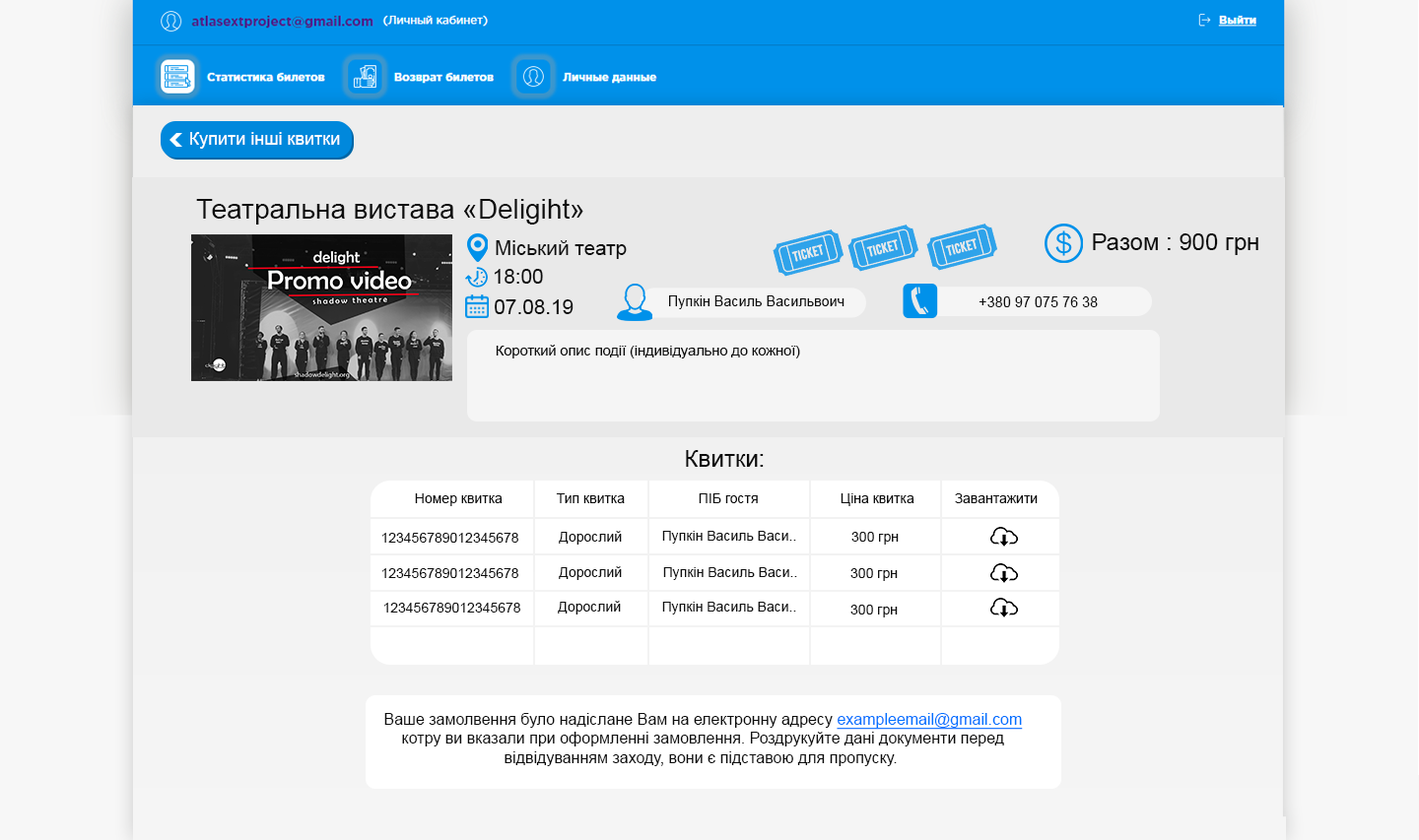
<style>
.page{position:relative;width:1419px;height:840px}
.page>*{position:absolute;margin:0}
.t1{font:17.7px "ArialMT";color:#ffffff}
.t2{font:27.6px "ArialMT";color:#0d0d0d}
.t3{font:23.6px "ArialMT";color:#0c0c0c}
.t4{font:20.3px "ArialMT";color:#0f0f0f}
.t5{font:20.3px "ArialMT";color:#0d0d0d}
.t6{font:14.4px "ArialMT";color:#0d0d0d}
.t7{font:14.2px "ArialMT";color:#0d0d0d}
.t8{font:23.6px "ArialMT";color:#0d0c0c}
.t9{font:13.8px "ArialMT";color:#0d0d0d}
.t10{font:13.8px "ArialMT";color:#111111}
.t11{font:15.8px "ArialMT";color:#0d0d0d}
.t12{font:15.8px "ArialMT";color:#0072ff;text-decoration:underline}
</style>
<div class="page">
<p class="t1" style="left:190px;top:132px;width:150px;height:17px">Купити інші квитки</p>
<p class="t2" style="left:196px;top:199px;width:387px;height:26px">Театральна вистава «Deligiht»</p>
<p class="t3" style="left:1093px;top:234px;width:165px;height:21px">Разом : 900 грн</p>
<p class="t4" style="left:496px;top:240px;width:131px;height:19px">Міський театр</p>
<p class="t5" style="left:494px;top:269px;width:49px;height:15px">18:00</p>
<p class="t5" style="left:495px;top:300px;width:78px;height:14px">07.08.19</p>
<p class="t6" style="left:669px;top:296px;width:175px;height:13px">Пупкін Василь Васильвоич</p>
<p class="t6" style="left:978px;top:297px;width:120px;height:10px">+380 97 075 76 38</p>
<p class="t7" style="left:496px;top:345px;width:304px;height:14px">Короткий опис події (індивідуально до кожної)</p>
<p class="t8" style="left:686px;top:450px;width:78px;height:17px">Квитки:</p>
<p class="t9" style="left:415px;top:494px;width:623px;height:12px">Номер квитка  Тип квитка   ПІБ гостя   Ціна квитка   Завантажити</p>
<p class="t9" style="left:381px;top:533px;width:137px;height:10px">123456789012345678</p>
<p class="t10" style="left:559px;top:531px;width:63px;height:14px">Дорослий</p>
<p class="t10" style="left:662px;top:531px;width:134px;height:13px">Пупкін Василь Васи..</p>
<p class="t10" style="left:851px;top:532px;width:48px;height:13px">300 грн</p>
<p class="t9" style="left:381px;top:569px;width:137px;height:9px">123456789012345678</p>
<p class="t10" style="left:559px;top:567px;width:63px;height:13px">Дорослий</p>
<p class="t10" style="left:663px;top:568px;width:134px;height:12px">Пупкін Василь Васи..</p>
<p class="t10" style="left:850px;top:569px;width:48px;height:12px">300 грн</p>
<p class="t9" style="left:383px;top:603px;width:137px;height:10px">123456789012345678</p>
<p class="t10" style="left:558px;top:601px;width:63px;height:14px">Дорослий</p>
<p class="t10" style="left:662px;top:602px;width:134px;height:13px">Пупкін Василь Васи..</p>
<p class="t10" style="left:850px;top:605px;width:48px;height:13px">300 грн</p>
<p class="t11" style="left:384px;top:713px;width:639px;height:54px;text-align:center">Ваше замолвення було надіслане Вам на електронну адресу <span class="t12">exampleemail@gmail.com<br></span> котру ви вказали при оформленні замовлення. Роздрукуйте дані документи перед <br>відвідуванням заходу, вони є підставою для пропуску.</p>
</div>
